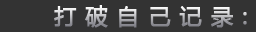
<style>
.page{position:relative;width:256px;height:32px;background:#333333}
.page>*{position:absolute;margin:0}
.t1{font:22px "MicrosoftYaHei";letter-spacing:0.4em;font-weight:bold}
</style>
<div class="page">
<p class="t1" style="left:54px;top:5px;width:193px;height:23px">打破自己记录:</p>
</div>
